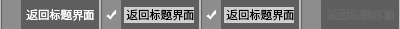
<style>
.page{position:relative;width:400px;height:29px;background:#5e5e5e}
.page>*{position:absolute;margin:0}
.t1{font:11.4px "SourceHanSansSC-Normal";color:#ffffff}
.t2{font:11.4px "SourceHanSansSC-Normal";color:#000000}
.t3{font:11.4px "SourceHanSansSC-Normal";color:#646464}
</style>
<div class="page">
<p class="t1" style="left:26px;top:9px;width:68px;height:12px">返回标题界面</p>
<p class="t2" style="left:126px;top:9px;width:68px;height:12px">返回标题界面</p>
<p class="t2" style="left:226px;top:9px;width:68px;height:12px">返回标题界面</p>
<p class="t3" style="left:326px;top:9px;width:68px;height:12px">返回标题界面</p>
</div>
